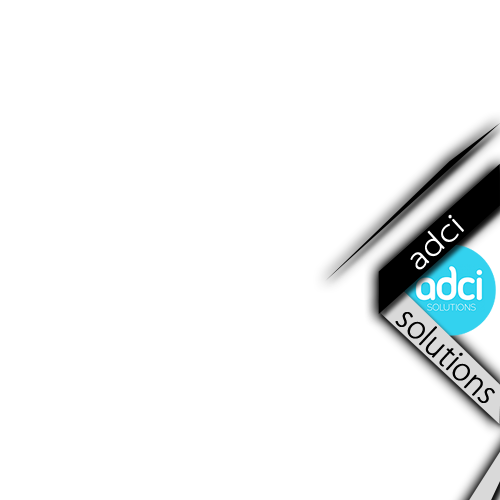
<style>
.page{position:relative;width:500px;height:500px;background:#ffffff}
.page>*{position:absolute;margin:0}
.t1{font:28px "KozGoPro-ExtraLight";color:#ffffff;font-weight:bold;scale:1.21 1}
.t2{font:30px "KozGoPro-ExtraLight";color:#000000;font-weight:bold}
</style>
<div class="page">
<p class="t1" style="left:410px;top:214px;width:54px;height:56px;rotate:-42deg">adci</p>
<p class="t2" style="left:395px;top:312px;width:100px;height:91px;rotate:43deg">solutions</p>
</div>
